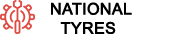
<style>
.page{position:relative;width:178px;height:34px;background:#ffffff}
.page>*{position:absolute;margin:0}
.t1{font:16px "ArialMT";color:#000000;font-weight:bold}
</style>
<div class="page">
<p class="t1" style="left:51px;top:2px;width:81px;height:33px;text-align:center">NATIONAL <br>TYRES</p>
</div>
